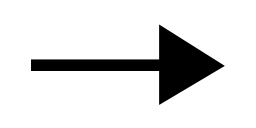
<style>
.page{position:relative;width:256px;height:128px;background:#ffffff}
.page>*{position:absolute;margin:0}
.t1{font:213px "AdobeHeitiStd-Regular";color:#000000}
</style>
<div class="page">
<p class="t1" style="left:31px;top:24px;width:194px;height:81px">→</p>
</div>
